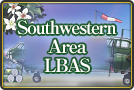
<style>
.page{position:relative;width:134px;height:90px}
.page>*{position:absolute;margin:0}
.t1{font:18px/19px "RyuminPro-ExBold";letter-spacing:-0.08em;color:#ffffff}
</style>
<div class="page">
<p class="t1" style="left:17px;top:20px;width:100px;height:53px;text-align:center">Southwestern<br>Area<br>LBAS</p>
</div>
